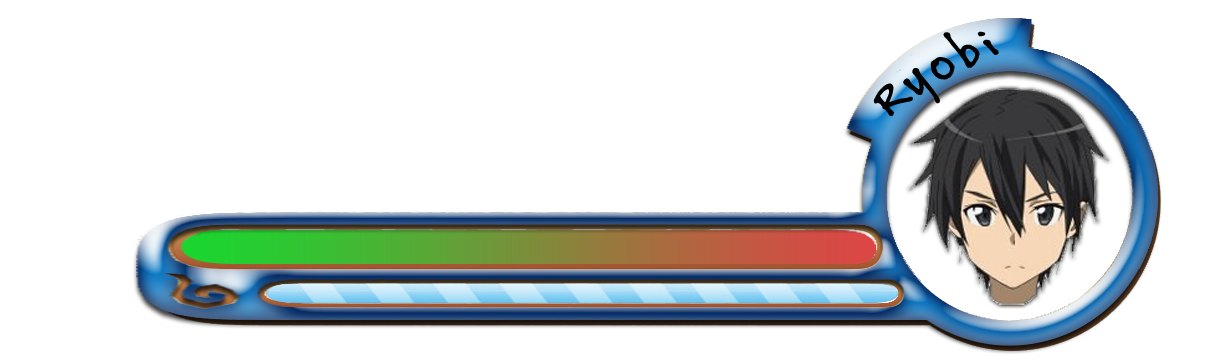
<style>
.page{position:relative;width:1214px;height:362px;background:#ffffff}
.page>*{position:absolute;margin:0}
.t1{font:39.3px "BuxtonSketch";letter-spacing:0.1em;color:#000000;scale:1.38 1}
</style>
<div class="page">
<p class="t1" style="left:873px;top:31px;width:126px;height:85px;rotate:-30deg">Ryobi</p>
</div>
